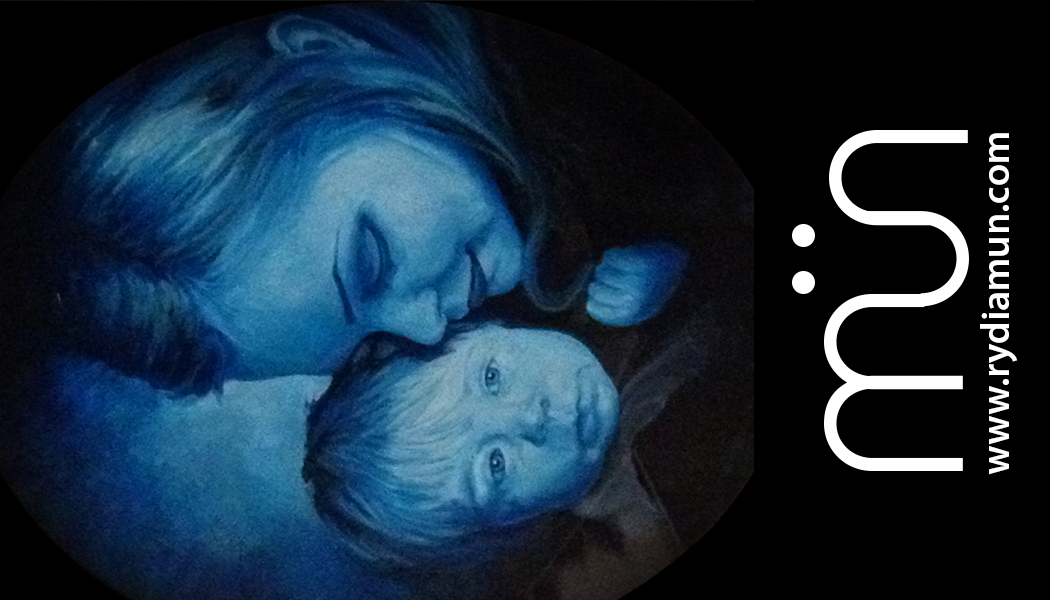
<style>
.page{position:relative;width:1050px;height:600px;background:#000000}
.page>*{position:absolute;margin:0}
.t1{font:39.6px "MyriadPro-Semibold";color:#ffffff}
</style>
<div class="page">
<p class="t1" style="left:980px;top:133px;width:37px;height:342px;rotate:-90deg">www.rydiamun.com</p>
</div>
